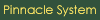
<style>
.page{position:relative;width:100px;height:20px;background:#32523c}
.page>*{position:absolute;margin:0}
.t1{font:12px "CenturyGothic";color:#f7e163}
</style>
<div class="page">
<p class="t1" style="left:4px;top:5px;width:92px;height:12px">Pinnacle System</p>
</div>
